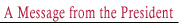
<style>
.page{position:relative;width:191px;height:28px;background:#ffffff}
.page>*{position:absolute;margin:0}
.t1{font:16.8px "CalistoMT";letter-spacing:0.05em;color:#b11a3b;scale:0.71 1}
</style>
<div class="page">
<p class="t1" style="left:4px;top:6px;width:169px;height:16px">A Message from the President</p>
</div>
